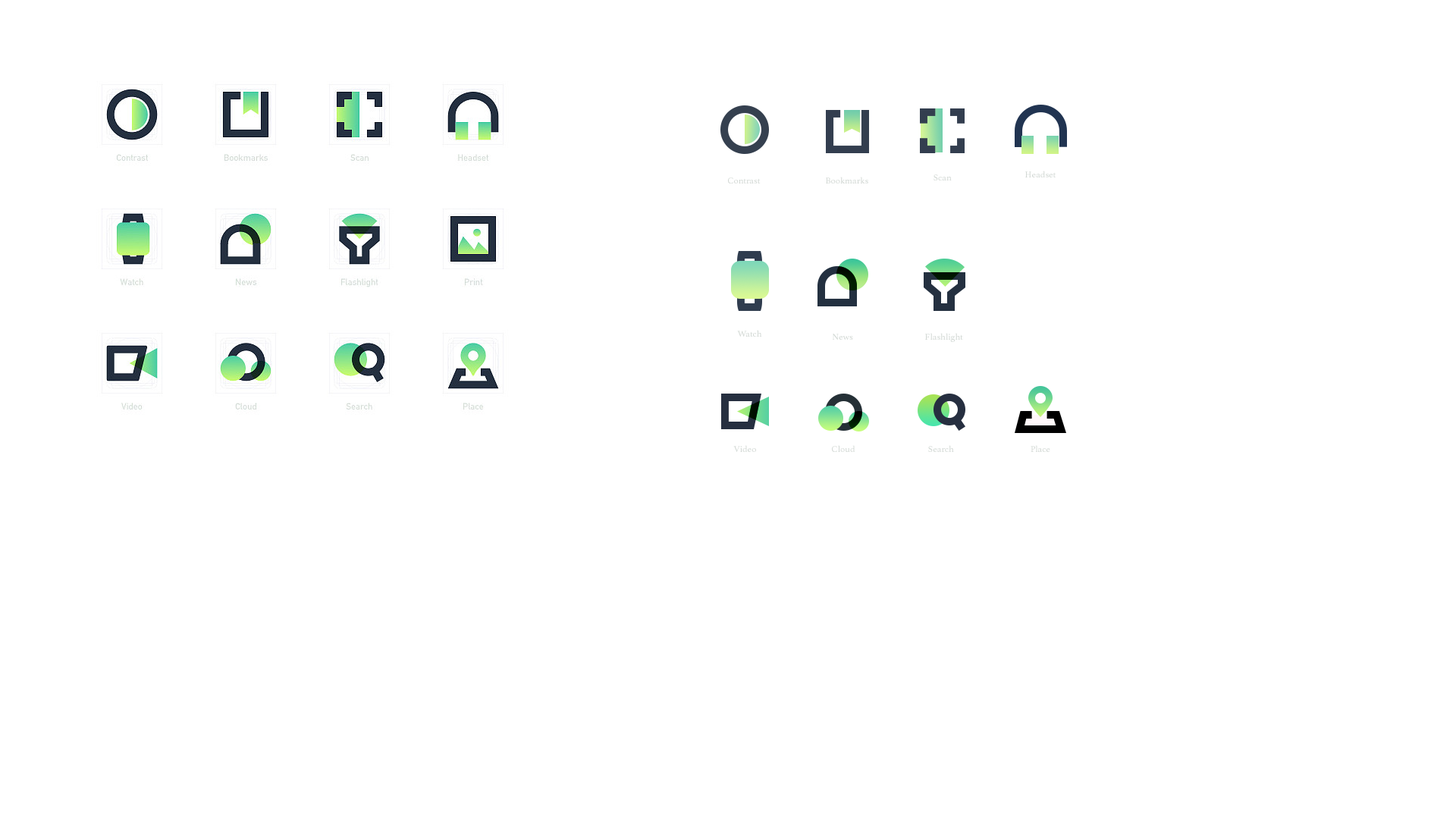
<style>
.page{position:relative;width:1456px;height:819px;background:#ffffff}
.page>*{position:absolute;margin:0}
.t1{font:9.1px "Athelas-Regular";color:#d1d7d3}
</style>
<div class="page">
<p class="t1" style="left:1025px;top:171px;width:31px;height:6px">Headset</p>
<p class="t1" style="left:728px;top:177px;width:33px;height:7px">Contrast</p>
<p class="t1" style="left:826px;top:177px;width:42px;height:7px">Bookmarks</p>
<p class="t1" style="left:933px;top:174px;width:19px;height:6px">Scan</p>
<p class="t1" style="left:737px;top:330px;width:25px;height:7px">Watch</p>
<p class="t1" style="left:833px;top:334px;width:20px;height:6px">News</p>
<p class="t1" style="left:925px;top:333px;width:38px;height:9px">Flashlight</p>
<p class="t1" style="left:733px;top:445px;width:23px;height:7px">Video</p>
<p class="t1" style="left:832px;top:445px;width:23px;height:7px">Cloud</p>
<p class="t1" style="left:928px;top:445px;width:26px;height:7px">Search</p>
<p class="t1" style="left:1031px;top:445px;width:19px;height:7px">Place</p>
</div>
